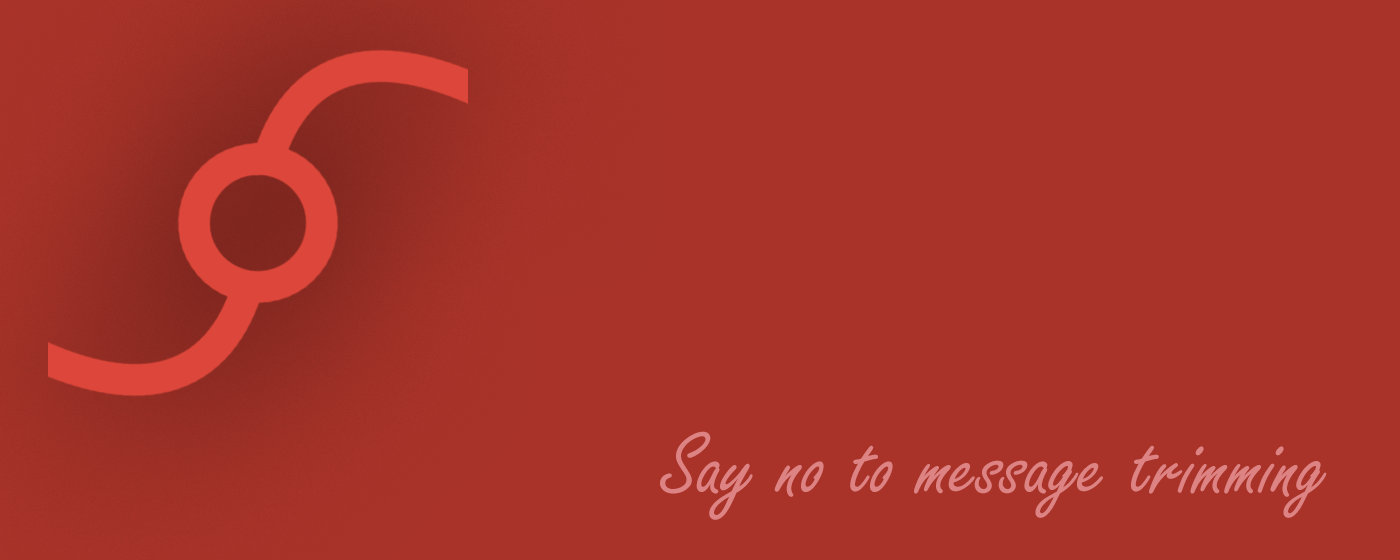
<style>
.page{position:relative;width:1400px;height:560px;background:#a93329}
.page>*{position:absolute;margin:0}
.t1{font:94.9px "FreestyleScript-Regular";color:#de8383}
</style>
<div class="page">
<p class="t1" style="left:660px;top:431px;width:667px;height:89px">Say no to message trimming</p>
</div>
